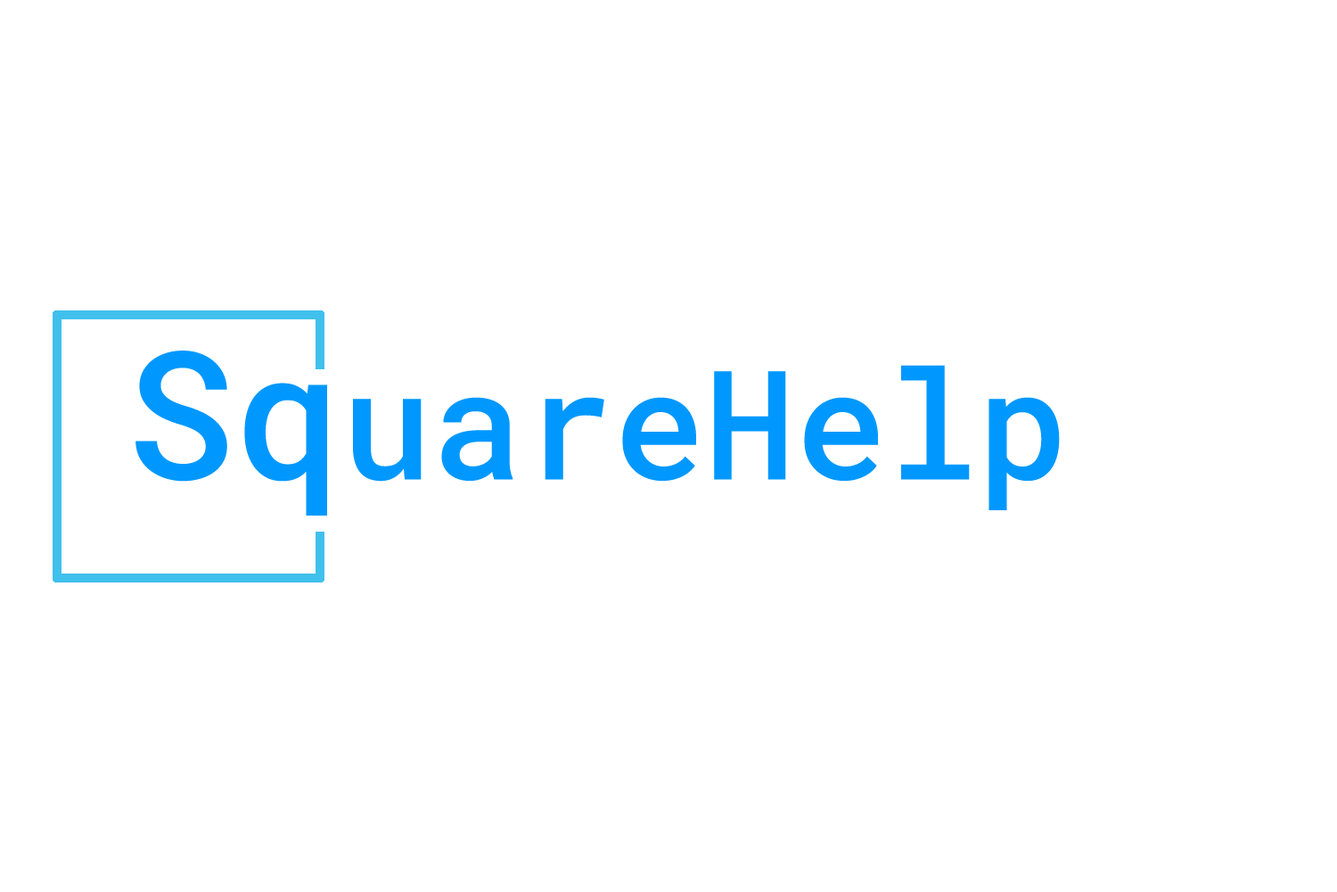
<style>
.page{position:relative;width:1337px;height:892px;background:#ffffff}
.page>*{position:absolute;margin:0}
.t1{font:151.6px "RobotoMono-Medium";color:#0098ff}
.t2{font:178.3px "RobotoMono-Medium";color:#0098ff}
</style>
<div class="page">
<p class="t1" style="left:136px;top:350px;width:924px;height:165px"><span class="t2">Sq</span>uareHelp</p>
</div>
